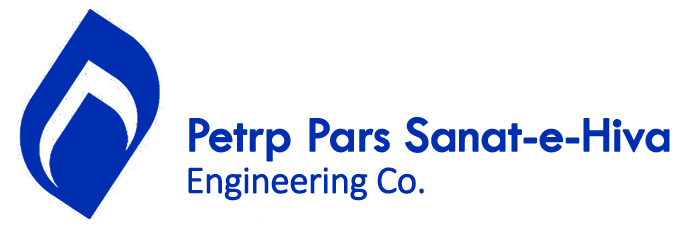
<style>
.page{position:relative;width:682px;height:233px;background:#ffffff}
.page>*{position:absolute;margin:0}
.t1{font:51.8px/41.7px "TwCenMT-Regular";letter-spacing:-0.035em;color:#002eb0;font-weight:bold}
.t2{font:38.6px/41.7px "Calibri-Light";letter-spacing:-0.03em;color:#002eb0;font-weight:bold}
</style>
<div class="page">
<p class="t1" style="left:188px;top:117px;width:482px;height:84px;text-align:right">Petrp Pars Sanat-e-Hiva<br><span class="t2">Engineering Co.</span></p>
</div>
